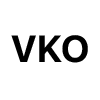
<style>
.page{position:relative;width:100px;height:100px;background:#ffffff}
.page>*{position:absolute;margin:0}
.t1{font:37.5px "SFProDisplay-Bold";color:#000000}
</style>
<div class="page">
<p class="t1" style="left:11px;top:35px;width:77px;height:28px">VKO</p>
</div>
